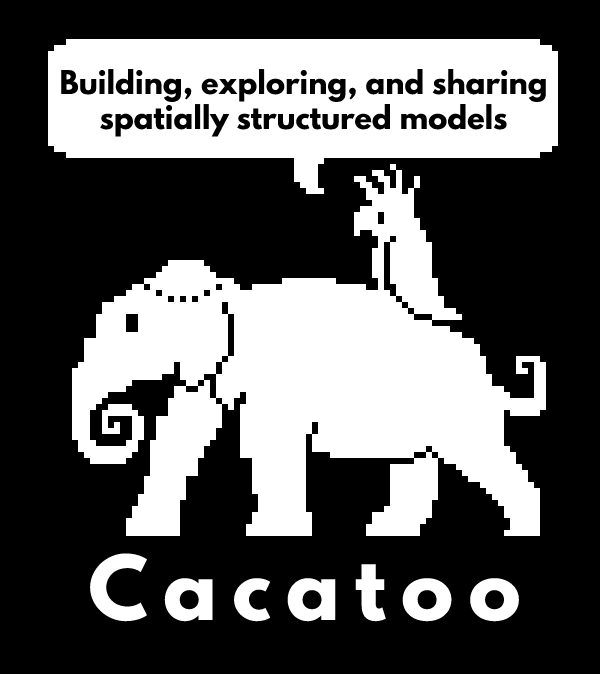
<style>
.page{position:relative;width:600px;height:674px;background:#000000}
.page>*{position:absolute;margin:0}
.t1{font:29px "LeagueSpartan-Bold";color:#000000}
.t2{font:79.3px "LeagueSpartan-Bold";letter-spacing:0.19em;color:#ffffff}
</style>
<div class="page">
<p class="t1" style="left:61px;top:69px;width:485px;height:68px;text-align:center">Building, exploring, and sharing spatially structured models</p>
<p class="t2" style="left:90px;top:553px;width:429px;height:69px">Cacatoo</p>
</div>
